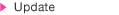
<style>
.page{position:relative;width:119px;height:15px;background:#ffffff}
.page>*{position:absolute;margin:0}
.t1{font:12px "HelveticaNeue";letter-spacing:0.025em;color:#363636}
</style>
<div class="page">
<p class="t1" style="left:14px;top:2px;width:41px;height:12px">Update</p>
</div>
